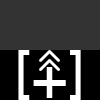
<style>
.page{position:relative;width:100px;height:100px;background:#333333}
.page>*{position:absolute;margin:0}
.t1{font:53.9px "ArialMT";color:#ffffff}
.t2{font:53.6px "ArialMT";color:#ffffff}
.t3{font:43.1px "ArialMT";color:#ffffff;scale:1.39 1}
.t4{font:72px "ArialMT";color:#ffffff;scale:1.64 1}
</style>
<div class="page">
<p class="t1" style="left:18px;top:50px;width:12px;height:50px">[</p>
<p class="t2" style="left:70px;top:50px;width:11px;height:50px">]</p>
<p class="t3" style="left:46px;top:67px;width:7px;height:31px">l</p>
<p class="t4" style="left:33px;top:80px;width:33px;height:6px">-</p>
</div>
